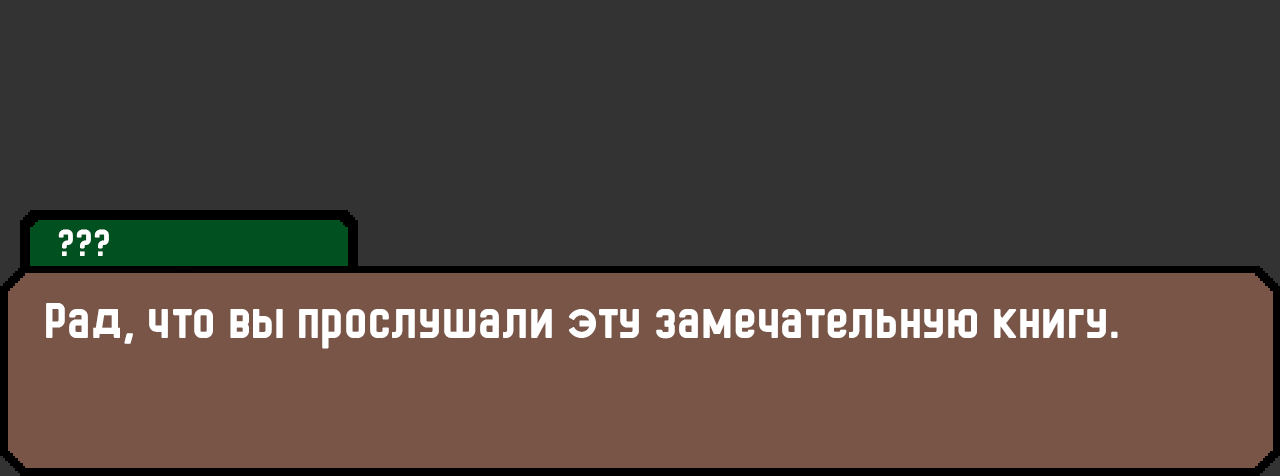
<style>
.page{position:relative;width:1280px;height:476px;background:#333333}
.page>*{position:absolute;margin:0}
.t1{font:36px "HermanoMayor";color:#ffffff}
.t2{font:48px "HermanoMayor";color:#ffffff}
</style>
<div class="page">
<p class="t1" style="left:58px;top:229px;width:51px;height:27px">???</p>
<p class="t2" style="left:46px;top:303px;width:1072px;height:46px">Рад, что вы прослушали эту замечательную книгу.</p>
</div>
